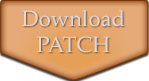
<style>
.page{position:relative;width:149px;height:81px}
.page>*{position:absolute;margin:0}
.t1{font:22px/26px "Palatino-Roman";color:#dbd9d9}
</style>
<div class="page">
<p class="t1" style="left:22px;top:10px;width:103px;height:43px;text-align:center">Download<br>PATCH</p>
</div>
